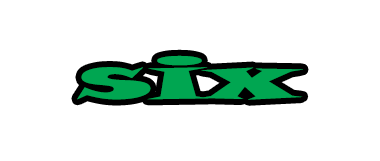
<style>
.page{position:relative;width:380px;height:161px;background:#ffffff}
.page>*{position:absolute;margin:0}
.t1{font:60px "SnapITC-Regular";color:#00a651;scale:2 1}
</style>
<div class="page">
<p class="t1" style="left:77px;top:55px;width:226px;height:45px">six</p>
</div>
